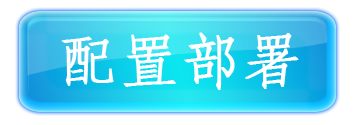
<style>
.page{position:relative;width:355px;height:125px;background:#ffffff}
.page>*{position:absolute;margin:0}
.t1{font:60px "STFangsong";color:#ffffff;font-weight:bold}
</style>
<div class="page">
<p class="t1" style="left:61px;top:32px;width:238px;height:58px">配置部署</p>
</div>
